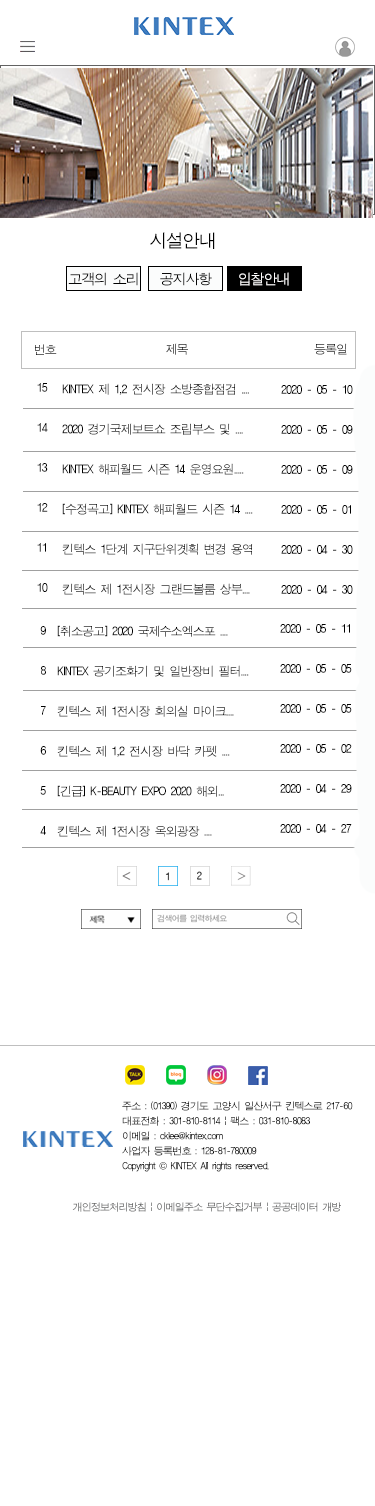
<style>
.page{position:relative;width:375px;height:1506px;background:#ffffff}
.page>*{position:absolute;margin:0}
.t1{font:18px "ÈÞ¸Õ°íµñ";letter-spacing:-0.08em;color:#010101}
.t2{font:14px "ÈÞ¸Õ°íµñ";letter-spacing:-0.08em;color:#070707}
.t3{font:14px "ÈÞ¸Õ°íµñ";letter-spacing:-0.08em;color:#000000}
.t4{font:14px "ÈÞ¸Õ°íµñ";letter-spacing:-0.08em;color:#080808}
.t5{font:14px "ÈÞ¸Õ°íµñ";letter-spacing:-0.08em;color:#fdfcfc}
.t6{font:12px "ÈÞ¸Õ°íµñ";letter-spacing:-0.08em}
.t7{font:12px/40px "ÈÞ¸Õ°íµñ";letter-spacing:-0.08em;color:#000000}
.t8{font:10px/15px "ÈÞ¸Õ°íµñ";letter-spacing:-0.08em;color:#020202}
.t9{font:10px/15px "Gulim";letter-spacing:-0.08em;color:#020202}
.t10{font:10px "ÈÞ¸Õ°íµñ";letter-spacing:-0.08em}
</style>
<div class="page">
<p class="t1" style="left:150px;top:232px;width:65px;height:17px">시설안내</p>
<p class="t2" style="left:68px;top:272px;width:70px;height:14px">고객의<span class="t3"> 소리</span></p>
<p class="t4" style="left:160px;top:272px;width:52px;height:14px">공지사항</p>
<p class="t5" style="left:239px;top:272px;width:50px;height:14px">입찰안내</p>
<p class="t6" style="left:35px;top:344px;width:22px;height:11px">번호</p>
<p class="t6" style="left:166px;top:343px;width:22px;height:12px">제목</p>
<p class="t6" style="left:314px;top:343px;width:33px;height:12px">등록일</p>
<p class="t7" style="left:37px;top:383px;width:11px;height:209px;text-align:center">15<br>14<br>13<br>12<br>11<br>10</p>
<p class="t7" style="left:62px;top:383px;width:191px;height:212px">KINTEX 제 1,2 전시장 소방종합점검 ....<br>2020 경기국제보트쇼 조립부스 및 ....<br>KINTEX 해피월드 시즌 14 운영요원.....<br>[수정곡고] KINTEX 해피월드 시즌 14 ....<br>킨텍스 1단계 지구단위곗획 변경 용역<br>킨텍스 제 1전시장 그랜드볼룸 상부....</p>
<p class="t7" style="left:281px;top:385px;width:72px;height:209px">2020 - 05 - 10<br>2020 - 05 - 09<br>2020 - 05 - 09<br>2020 - 05 - 01<br>2020 - 04 - 30<br>2020 - 04 - 30</p>
<p class="t7" style="left:40px;top:626px;width:6px;height:209px;text-align:center">9<br>8<br>7<br>6<br>5<br>4</p>
<p class="t7" style="left:57px;top:625px;width:192px;height:212px">[취소공고] 2020 국제수소엑스포 ....<br>KINTEX 공기조화기 및 일반장비 필터....<br>킨텍스 제 1전시장 회의실 마이크....<br>킨텍스 제 1,2 전시장 바닥 카펫 ....<br>[긴급] K-BEAUTY EXPO 2020 해외...<br>킨텍스 제 1전시장 옥외광장 ....</p>
<p class="t7" style="left:280px;top:624px;width:72px;height:209px">2020 - 05 - 11<br>2020 - 05 - 05<br>2020 - 05 - 05<br>2020 - 05 - 02<br>2020 - 04 - 29<br>2020 - 04 - 27</p>
<p class="t8" style="left:122px;top:1101px;width:231px;height:71px">주소 : (01390) 경기도 고양시 일산서구 킨텍스로 217-60<br>대표전화 : 301-810-8114 | 팩스 : 031-810-8083<br>이메일 : cklee@kintex.com <br>사업자 등록번호 : 128-81-780009<br>Copyright <span class="t9">©</span> KINTEX All rights reserved.</p>
<p class="t10" style="left:72px;top:1202px;width:269px;height:10px">개인정보처리방침 | 이메일주소 무단수집거부 | 공공데이터 개방</p>
</div>
